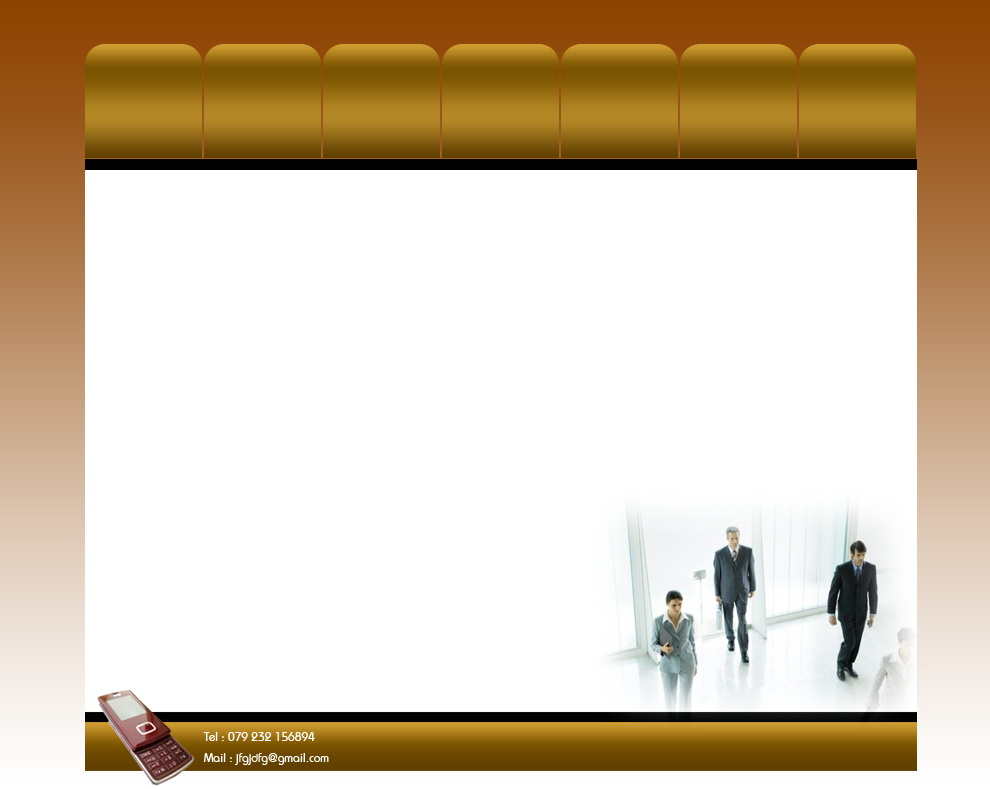
<style>
.page{position:relative;width:990px;height:789px;background:#ffffff}
.page>*{position:absolute;margin:0}
.t1{font:12px "BahamasPSMT";color:#ffffff}
</style>
<div class="page">
<p class="t1" style="left:203px;top:732px;width:112px;height:9px">Tel : 079 232 156894</p>
<p class="t1" style="left:203px;top:753px;width:126px;height:12px">Mail : jfgjdfg@gmail.com</p>
</div>
